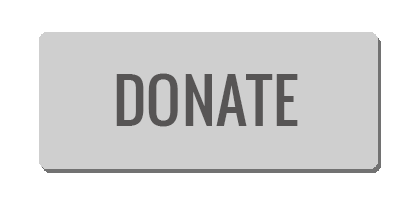
<style>
.page{position:relative;width:400px;height:202px;background:#cfcfcf}
.page>*{position:absolute;margin:0}
.t1{font:60px "Oswald-Regular";letter-spacing:0.01em;color:#575555}
</style>
<div class="page">
<p class="t1" style="left:116px;top:73px;width:182px;height:54px">DONATE</p>
</div>
